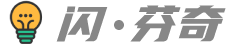
<style>
.page{position:relative;width:236px;height:46px;background:#ffffff}
.page>*{position:absolute;margin:0}
.t1{font:50px "YouSheBiaoTiHei";color:#878787;font-style:italic}
</style>
<div class="page">
<p class="t1" style="left:56px;top:5px;width:170px;height:37px">闪 芬奇</p>
</div>
